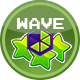
<style>
.page{position:relative;width:80px;height:80px;background:#ffffff}
.page>*{position:absolute;margin:0}
.t1{font:12px "Emulogic";color:#ffffff}
</style>
<div class="page">
<p class="t1" style="left:17px;top:18px;width:47px;height:11px">wave</p>
</div>
